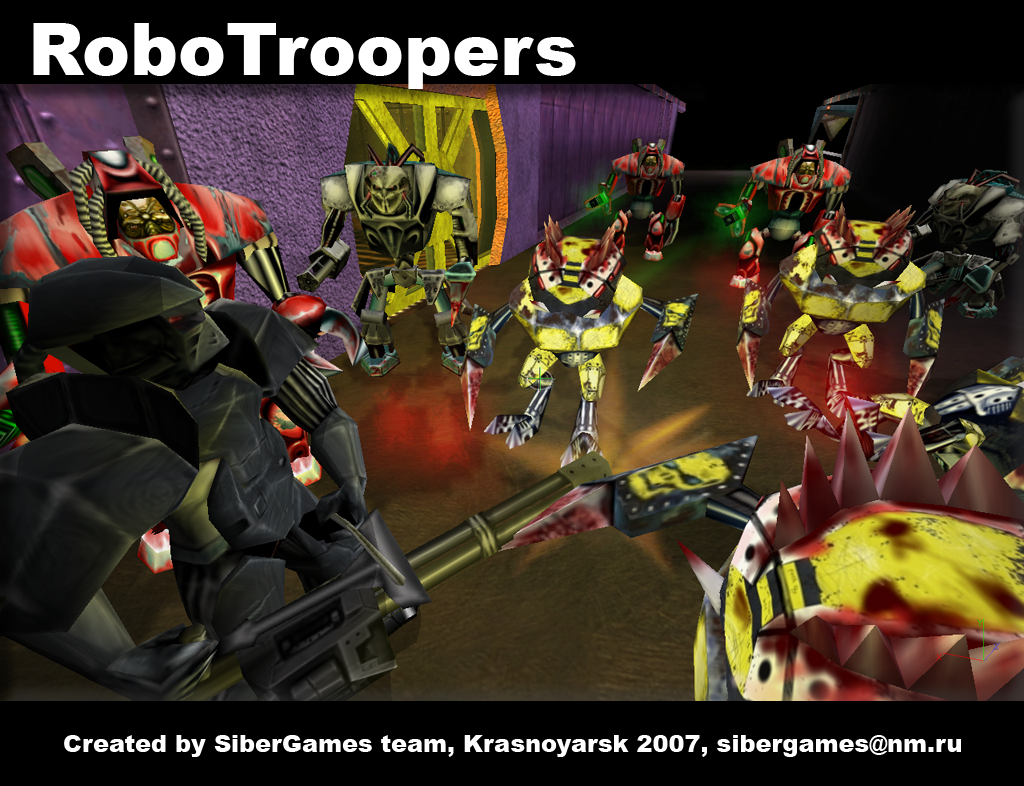
<style>
.page{position:relative;width:1024px;height:786px;background:#000000}
.page>*{position:absolute;margin:0}
.t1{font:72px "Arial-Black";color:#ffffff}
.t2{font:24px "Arial-Black";color:#ffffff}
</style>
<div class="page">
<p class="t1" style="left:33px;top:23px;width:543px;height:66px">RoboTroopers</p>
<p class="t2" style="left:64px;top:735px;width:897px;height:22px">Created by SiberGames team, Krasnoyarsk 2007, sibergames@nm.ru</p>
</div>
